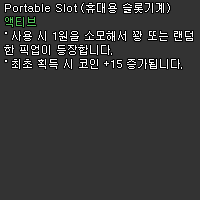
<style>
.page{position:relative;width:200px;height:200px;background:#333333}
.page>*{position:absolute;margin:0}
.t1{font:11px/14px "Dotum";color:#ffffff}
.t2{font:11px/14px "Dotum";color:#56c45b}
</style>
<div class="page">
<p class="t1" style="left:4px;top:3px;width:189px;height:66px">Portable Slot (휴대용 슬롯기계)<br><span class="t2">액티브<br></span>˚ 사용 시 1원을 소모해서 꽝 또는 랜덤<br>한 픽업이 등장합니다.<br>˚ 최초 획득 시 코인 +15 증가됩니다.</p>
</div>
